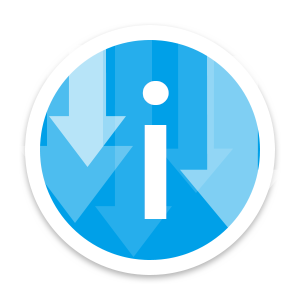
<style>
.page{position:relative;width:300px;height:300px;background:#ffffff}
.page>*{position:absolute;margin:0}
.t1{font:187.5px "SegoeUI-Semibold";color:#ffffff}
</style>
<div class="page">
<p class="t1" style="left:142px;top:81px;width:27px;height:138px">i</p>
</div>
